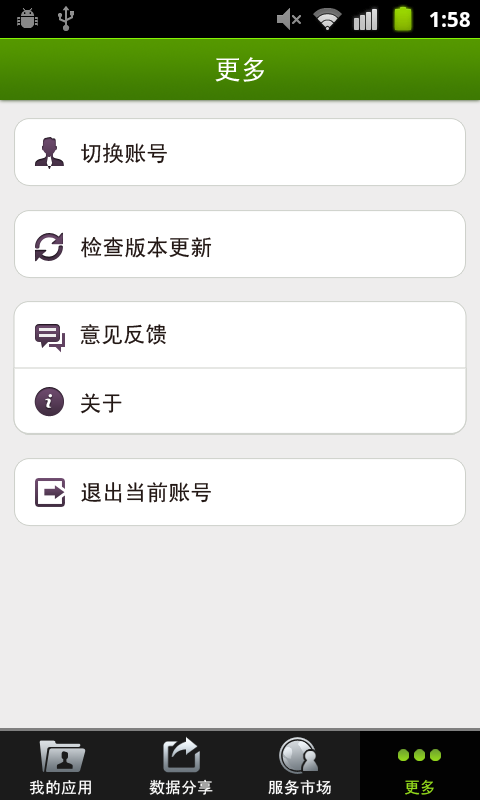
<style>
.page{position:relative;width:480px;height:800px;background:#eeeded}
.page>*{position:absolute;margin:0}
.t1{font:27px "SimHei";color:#ffffff}
.t2{font:22px "SimHei";color:#231815}
.t3{font:16px "SimHei";color:#ffffff}
.t4{font:16px "SimHei";color:#fffffe}
.t5{font:16px "SimHei";color:#94db1c}
</style>
<div class="page">
<p class="t1" style="left:215px;top:57px;width:49px;height:25px">更多</p>
<p class="t2" style="left:81px;top:143px;width:86px;height:21px">切换账号</p>
<p class="t2" style="left:81px;top:236px;width:131px;height:22px">检查版本更新</p>
<p class="t2" style="left:80px;top:324px;width:87px;height:21px">意见反馈</p>
<p class="t2" style="left:80px;top:393px;width:42px;height:21px">关于</p>
<p class="t2" style="left:81px;top:482px;width:130px;height:21px">退出当前账号</p>
<p class="t3" style="left:29px;top:780px;width:62px;height:15px">我的应用</p>
<p class="t4" style="left:149px;top:779px;width:64px;height:16px">数据分享</p>
<p class="t3" style="left:268px;top:779px;width:63px;height:16px">服务市场</p>
<p class="t5" style="left:405px;top:779px;width:29px;height:16px">更多</p>
</div>
